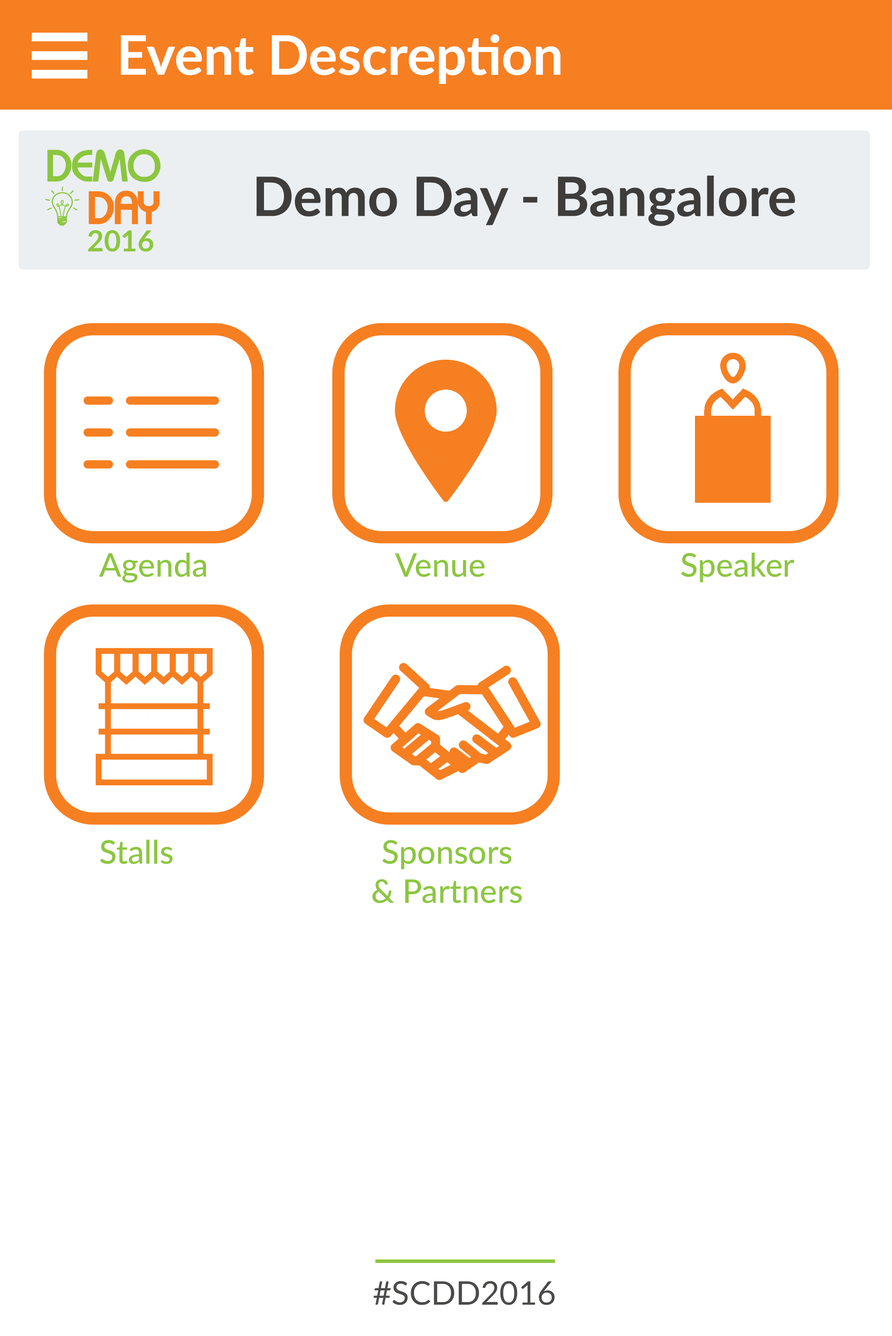
<style>
.page{position:relative;width:892px;height:1336px;background:#ffffff}
.page>*{position:absolute;margin:0}
.t1{font:54.4px "Lato-Bold";color:#ffffff}
.t2{font:54.4px "Lato-Bold";color:#3e3d3c}
.t3{font:32.6px "Lato-Medium";color:#8cc63f}
.t4{font:32.6px "Lato-Regular";color:#4a4b49}
</style>
<div class="page">
<p class="t1" style="left:121px;top:34px;width:440px;height:50px">Event Descreption</p>
<p class="t2" style="left:257px;top:175px;width:538px;height:51px">Demo Day - Bangalore</p>
<p class="t3" style="left:99px;top:552px;width:107px;height:31px">Agenda</p>
<p class="t3" style="left:395px;top:553px;width:90px;height:24px">Venue</p>
<p class="t3" style="left:681px;top:552px;width:113px;height:31px">Speaker</p>
<p class="t3" style="left:100px;top:840px;width:73px;height:24px">Stalls</p>
<p class="t3" style="left:372px;top:840px;width:150px;height:64px;text-align:center">Sponsors<br>&amp; Partners</p>
<p class="t4" style="left:374px;top:1281px;width:181px;height:25px">#SCDD2016</p>
</div>
